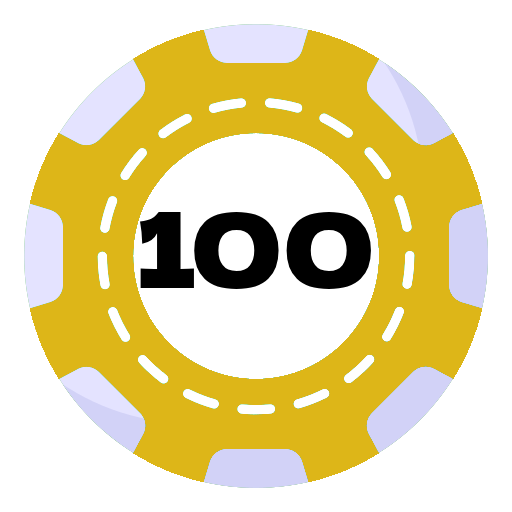
<style>
.page{position:relative;width:512px;height:512px;background:#ffffff}
.page>*{position:absolute;margin:0}
.t1{font:103.3px "DelaGothicOne-Regular";color:#000000}
</style>
<div class="page">
<p class="t1" style="left:140px;top:211px;width:231px;height:79px">100</p>
</div>
